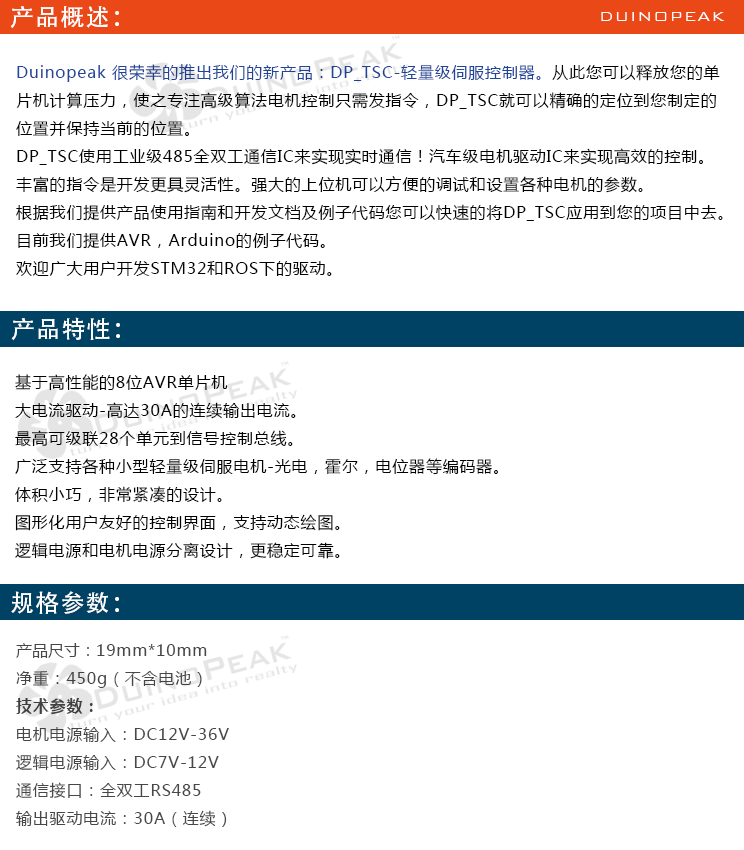
<style>
.page{position:relative;width:744px;height:850px;background:#ffffff}
.page>*{position:absolute;margin:0}
.t1{font:24px "AdobeHeitiStd-Regular";letter-spacing:0.05em;color:#ffffff}
.t2{font:18px "BankGothicBT-Light";letter-spacing:0.05em;color:#ffffff}
.t3{font:16px "MicrosoftYaHei";letter-spacing:0.05em;color:#000000}
.t4{font:16px "MicrosoftYaHei";letter-spacing:0.05em;color:#20459b}
.t5{font:16px "MicrosoftYaHei";letter-spacing:0.05em;color:#474747}
.t6{font:16px "MicrosoftYaHei";color:#474747}
.t7{font:16px "MicrosoftYaHei-Bold";letter-spacing:0.05em;color:#474747}
</style>
<div class="page">
<p class="t1" style="left:10px;top:6px;width:109px;height:23px">产品概述：</p>
<p class="t2" style="left:601px;top:12px;width:124px;height:9px">DUINOPEAK</p>
<p class="t3" style="left:16px;top:64px;width:707px;height:212px"><span class="t4">Duinopeak 很荣幸的推出我们的新产品：DP_TSC-轻量级伺服控制器。</span>从此您可以释放您的单<br>片机计算压力，使之专注高级算法电机控制只需发指令，DP_TSC就可以精确的定位到您制定的<br>位置并保持当前的位置。<br>DP_TSC使用工业级485全双工通信IC来实现实时通信！汽车级电机驱动IC来实现高效的控制。<br>丰富的指令是开发更具灵活性。强大的上位机可以方便的调试和设置各种电机的参数。<br>根据我们提供产品使用指南和开发文档及例子代码您可以快速的将DP_TSC应用到您的项目中去。<br>目前我们提供AVR，Arduino的例子代码。<br>欢迎广大用户开发STM32和ROS下的驱动。</p>
<p class="t1" style="left:11px;top:317px;width:109px;height:24px">产品特性：</p>
<p class="t3" style="left:15px;top:374px;width:483px;height:185px">基于高性能的8位AVR单片机<br>大电流驱动-高达30A的连续输出电流。<br>最高可级联28个单元到信号控制总线。<br>广泛支持各种小型轻量级伺服电机-光电，霍尔，电位器等编码器。<br>体积小巧，非常紧凑的设计。<br>图形化用户友好的控制界面，支持动态绘图。<br>逻辑电源和电机电源分离设计，更稳定可靠。</p>
<p class="t1" style="left:11px;top:591px;width:108px;height:23px">规格参数：</p>
<p class="t5" style="left:16px;top:643px;width:213px;height:184px"><span class="t6">产品尺寸：</span>19mm*10mm<br>净重：450g（不含电池）<br><span class="t7">技术参数：<br></span>电机电源输入：DC12V-36V<br>逻辑电源输入：DC7V-12V<br>通信接口：全双工RS485<br>输出驱动电流：30A（连续）</p>
</div>
